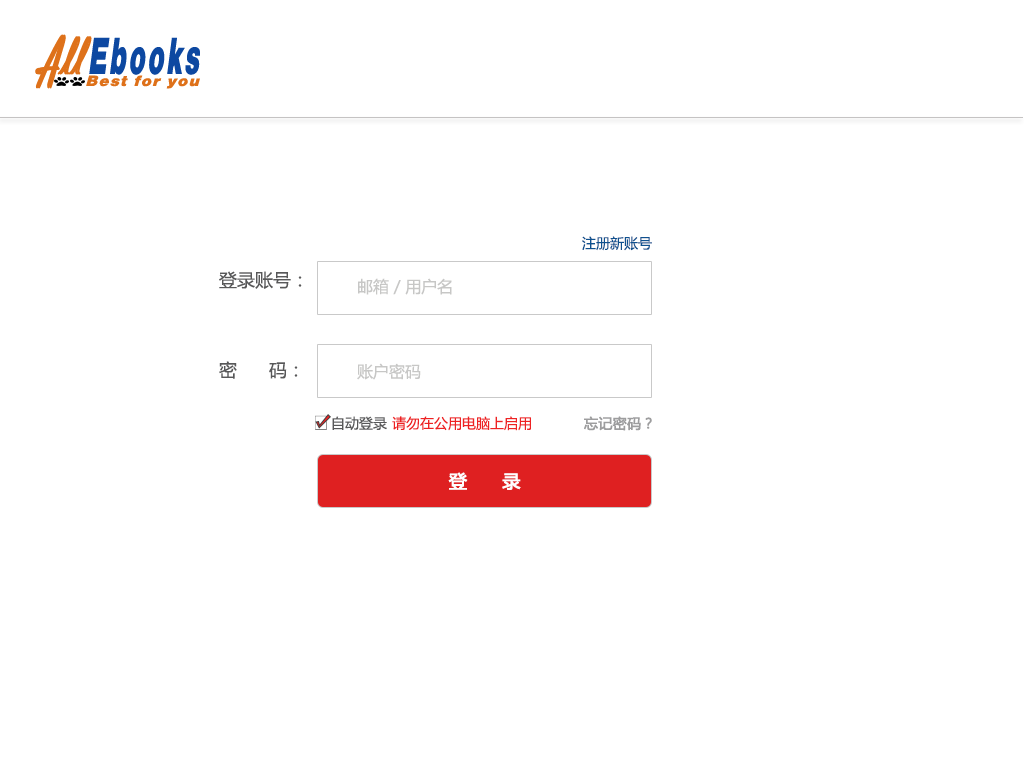
<style>
.page{position:relative;width:1024px;height:768px;background:#ffffff}
.page>*{position:absolute;margin:0}
.t1{font:14px "MicrosoftYaHei";color:#0e518f}
.t2{font:18px "MicrosoftYaHei";color:#585859}
.t3{font:16px "MicrosoftYaHei";color:#c7c7c6}
.t4{font:14px "MicrosoftYaHei";color:#585859}
.t5{font:14px "MicrosoftYaHei";color:#ee2223}
.t6{font:14px "MicrosoftYaHei";color:#9d9d9e;font-weight:bold}
.t7{font:18px "MicrosoftYaHei";color:#fefefe;font-weight:bold}
</style>
<div class="page">
<p class="t1" style="left:582px;top:236px;width:70px;height:15px">注册新账号</p>
<p class="t2" style="left:219px;top:271px;width:83px;height:18px">登录账号：</p>
<p class="t3" style="left:358px;top:278px;width:94px;height:17px">邮箱 / 用户名</p>
<p class="t2" style="left:219px;top:361px;width:79px;height:18px">密      码：</p>
<p class="t3" style="left:357px;top:363px;width:64px;height:17px">账户密码</p>
<p class="t4" style="left:332px;top:416px;width:55px;height:15px">自动登录</p>
<p class="t5" style="left:392px;top:416px;width:139px;height:15px">请勿在公用电脑上启用</p>
<p class="t6" style="left:584px;top:416px;width:68px;height:15px">忘记密码？</p>
<p class="t7" style="left:448px;top:472px;width:73px;height:18px">登      录</p>
</div>
